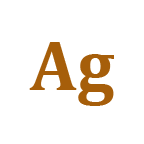
<style>
.page{position:relative;width:144px;height:144px;background:#ffffff}
.page>*{position:absolute;margin:0}
.t1{font:72px "Cambria-Bold";color:#a65e0a}
</style>
<div class="page">
<p class="t1" style="left:29px;top:42px;width:85px;height:64px">Ag</p>
</div>
